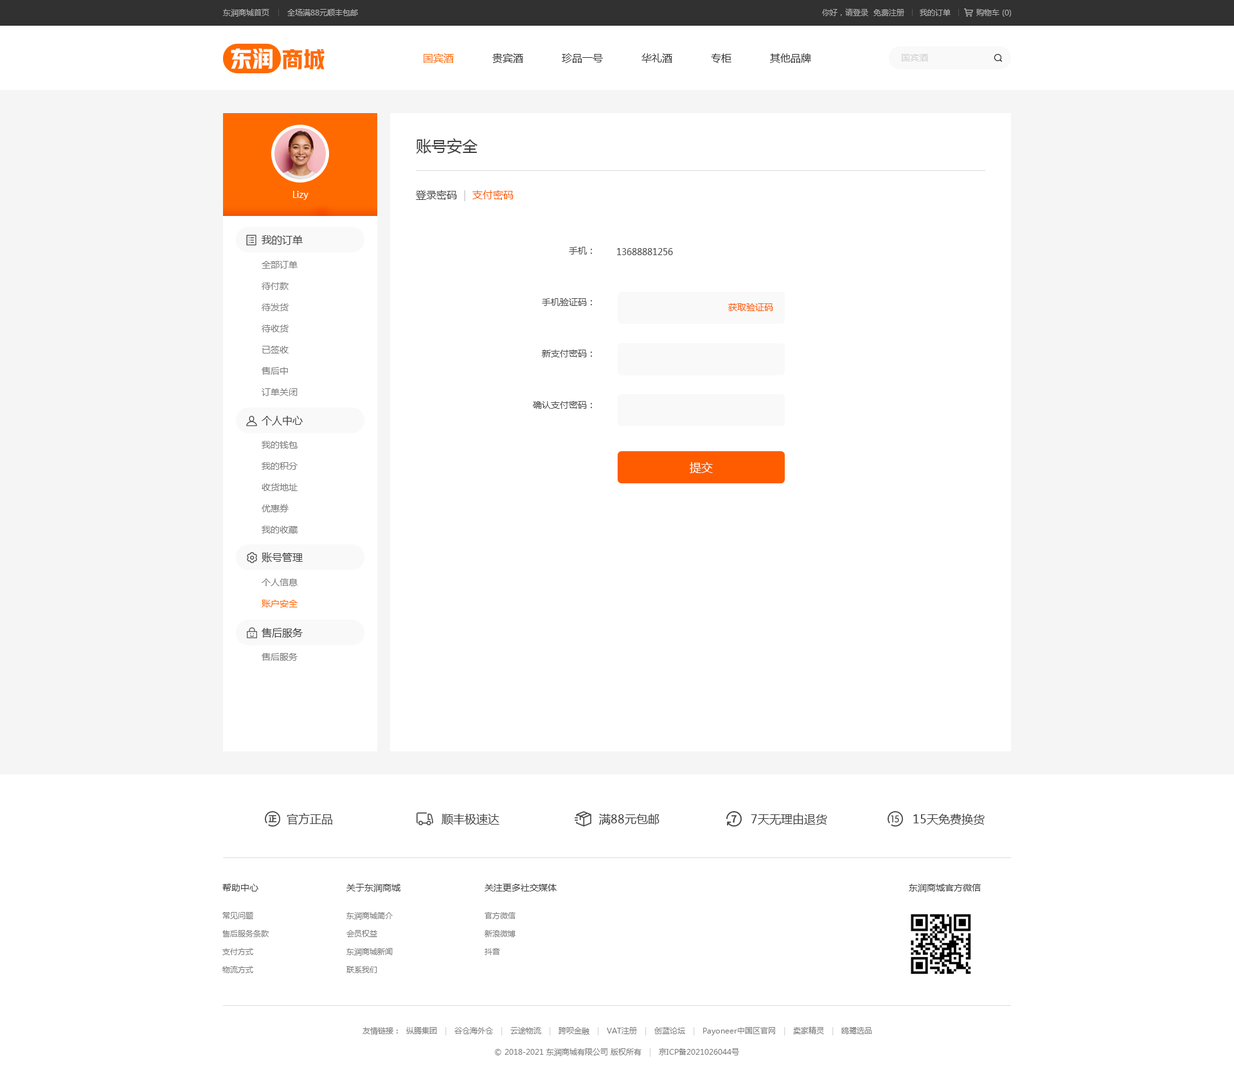
<style>
.page{position:relative;width:1234px;height:1083px;background:#ffffff}
.page>*{position:absolute;margin:0}
.t1{font:7.7px "MicrosoftYaHei";color:#b0b0b0}
.t2{font:7.7px "MicrosoftYaHei";color:#acacac}
.t3{font:21.9px "HYYakuHei-HEW";color:#ffffff}
.t4{font:21.9px "HYYakuHei-HEW";color:#ff6a00}
.t5{font:10.3px "MicrosoftYaHei";color:#333333}
.t6{font:10.3px "MicrosoftYaHei";color:#ff6a00}
.t7{font:9px "MicrosoftYaHei";color:#d2d2d2}
.t8{font:15.4px "MicrosoftYaHei";color:#434343}
.t9{font:9px "MicrosoftYaHei";color:#ffffff}
.t10{font:10.3px "MicrosoftYaHei";color:#434343}
.t11{font:10.3px "MicrosoftYaHei";color:#c9c9c9}
.t12{font:10.3px "MicrosoftYaHei";color:#ff5c00}
.t13{font:9px/51.4px "MicrosoftYaHei";color:#4b4b4b}
.t14{font:9px "MicrosoftYaHei";color:#4b4b4b}
.t15{font:9px/21.2px "MicrosoftYaHei";color:#7d7d7d}
.t16{font:9px "MicrosoftYaHei";color:#ff5c00}
.t17{font:11.6px "MicrosoftYaHei";color:#ffffff}
.t18{font:9px/21.2px "MicrosoftYaHei";color:#ff6a00}
.t19{font:9px "MicrosoftYaHei";color:#7d7d7d}
.t20{font:11.6px "MicrosoftYaHei";color:#434343}
.t21{font:9px "MicrosoftYaHei";color:#434343}
.t22{font:7.7px/18px "MicrosoftYaHei";color:#7d7d7d}
.t23{font:7.7px "MicrosoftYaHei";color:#7d7d7d}
.t24{font:7.7px "MicrosoftYaHei";color:#d2d2d2}
</style>
<div class="page">
<p class="t1" style="left:223px;top:9px;width:135px;height:8px">东润商城首页       全场满88元顺丰包邮</p>
<p class="t2" style="left:822px;top:8px;width:190px;height:9px">你好，请登录  免费注册      我的订单          购物车 (0)</p>
<p class="t3" style="left:231px;top:48px;width:42px;height:21px">东润</p>
<p class="t4" style="left:282px;top:49px;width:43px;height:20px">商城</p>
<p class="t5" style="left:424px;top:53px;width:387px;height:10px"><span class="t6">国宾酒</span>            贵宾酒            珍品一号            华礼酒            专柜            其他品牌</p>
<p class="t7" style="left:902px;top:54px;width:26px;height:8px">国宾酒</p>
<p class="t8" style="left:416px;top:138px;width:62px;height:16px">账号安全</p>
<p class="t9" style="left:293px;top:191px;width:16px;height:9px">Lizy</p>
<p class="t10" style="left:416px;top:190px;width:98px;height:11px">登录密码  <span class="t11">|  </span><span class="t12">支付密码</span></p>
<p class="t10" style="left:262px;top:235px;width:41px;height:10px">我的订单</p>
<p class="t13" style="left:533px;top:247px;width:59px;height:162px;text-align:right">手机：<br>手机验证码：<br>新支付密码：<br>确认支付密码：</p>
<p class="t14" style="left:617px;top:248px;width:56px;height:7px">13688881256</p>
<p class="t15" style="left:262px;top:261px;width:36px;height:135px">全部订单<br>待付款<br>待发货<br>待收货<br>已签收<br>售后中<br>订单关闭</p>
<p class="t16" style="left:728px;top:303px;width:45px;height:8px">获取验证码</p>
<p class="t10" style="left:262px;top:416px;width:41px;height:10px">个人中心</p>
<p class="t15" style="left:262px;top:441px;width:36px;height:93px">我的钱包<br>我的积分<br>收货地址<br>优惠券<br>我的收藏</p>
<p class="t17" style="left:690px;top:462px;width:23px;height:11px">提交</p>
<p class="t10" style="left:262px;top:552px;width:41px;height:10px">账号管理</p>
<p class="t15" style="left:262px;top:579px;width:36px;height:29px">个人信息<br><span class="t18">账户安全</span></p>
<p class="t10" style="left:262px;top:628px;width:41px;height:10px">售后服务</p>
<p class="t19" style="left:262px;top:653px;width:36px;height:8px">售后服务</p>
<p class="t20" style="left:287px;top:813px;width:45px;height:12px">官方正品</p>
<p class="t20" style="left:442px;top:814px;width:58px;height:11px">顺丰极速达</p>
<p class="t20" style="left:599px;top:814px;width:61px;height:11px">满88元包邮</p>
<p class="t20" style="left:751px;top:813px;width:76px;height:12px">7天无理由退货</p>
<p class="t20" style="left:914px;top:814px;width:71px;height:11px">15天免费换货</p>
<p class="t21" style="left:222px;top:884px;width:36px;height:8px">帮助中心</p>
<p class="t21" style="left:346px;top:884px;width:55px;height:8px">关于东润商城</p>
<p class="t21" style="left:485px;top:884px;width:72px;height:8px">关注更多社交媒体</p>
<p class="t21" style="left:909px;top:884px;width:72px;height:8px">东润商城官方微信</p>
<p class="t22" style="left:222px;top:912px;width:47px;height:61px">常见问题<br>售后服务条款<br>支付方式<br>物流方式</p>
<p class="t22" style="left:346px;top:912px;width:47px;height:61px">东润商城简介<br>会员权益<br>东润商城新闻<br>联系我们</p>
<p class="t22" style="left:485px;top:912px;width:31px;height:43px">官方微信<br>新浪微博<br>抖音</p>
<p class="t23" style="left:363px;top:1027px;width:509px;height:9px">友情链接：  纵腾集团   <span class="t24">|   </span>谷仓海外仓   <span class="t24">|   </span>云途物流   <span class="t24">|   </span>跨呗金融   <span class="t24">|   </span>VAT注册   <span class="t24">|   </span>创蓝论坛   <span class="t24">|   </span>Payoneer中国区官网   <span class="t24">|   </span>卖家精灵   <span class="t24">|   </span>鸥鹭选品</p>
<p class="t23" style="left:495px;top:1048px;width:244px;height:9px">© 2018-2021 东润商城有限公司 版权所有   <span class="t24">|   </span>京ICP备2021026044号</p>
</div>
